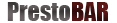
<style>
.page{position:relative;width:117px;height:23px;background:#ffffff}
.page>*{position:absolute;margin:0}
.t1{font:24px "Impact"}
</style>
<div class="page">
<p class="t1" style="left:7px;top:2px;width:101px;height:19px">PrestoBAR</p>
</div>
